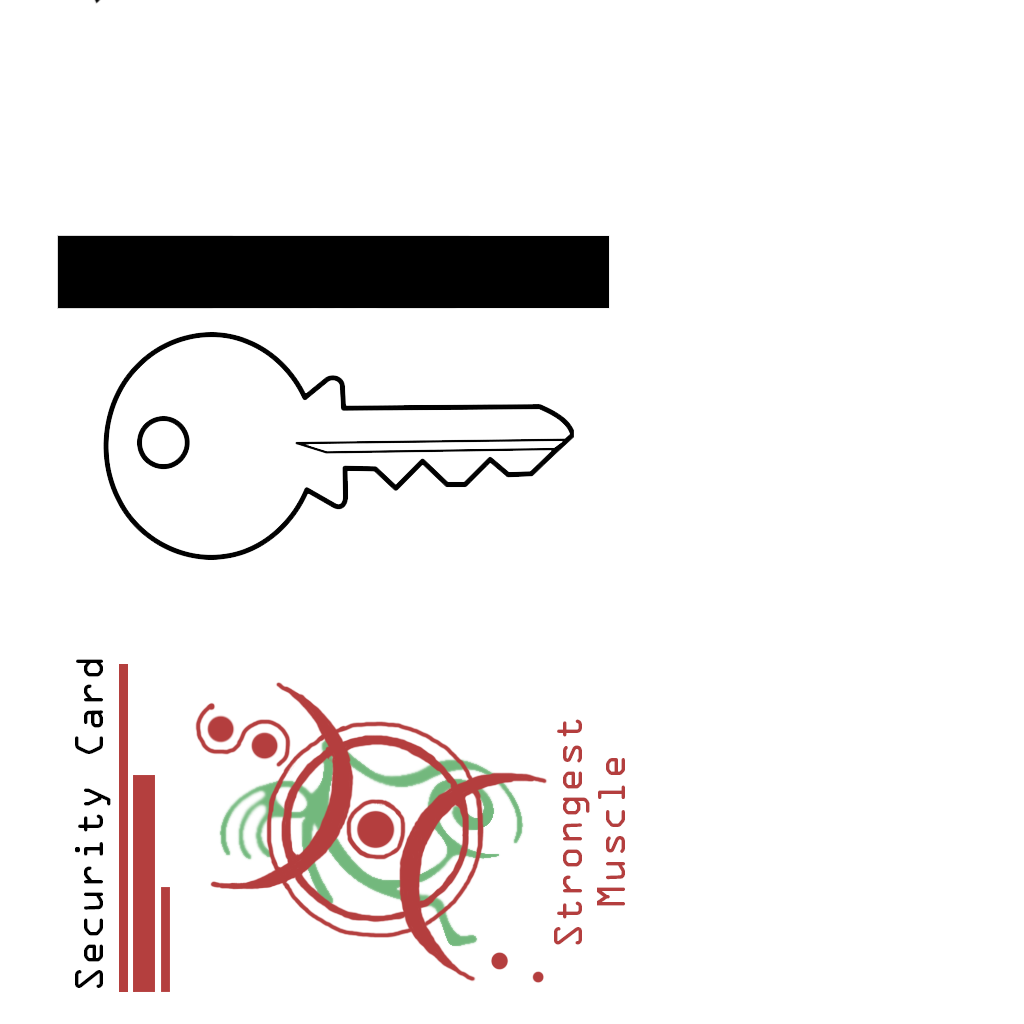
<style>
.page{position:relative;width:1024px;height:1024px;background:#ffffff}
.page>*{position:absolute;margin:0}
.t1{font:36px "OCRAStd";color:#000000}
.t2{font:36px "OCRAStd";color:#b43e3e}
</style>
<div class="page">
<p class="t1" style="left:75px;top:659px;width:36px;height:329px;rotate:-90deg">Security Card</p>
<p class="t2" style="left:554px;top:719px;width:71px;height:226px;text-align:center;rotate:-90deg">Strongest<br>Muscle</p>
</div>
